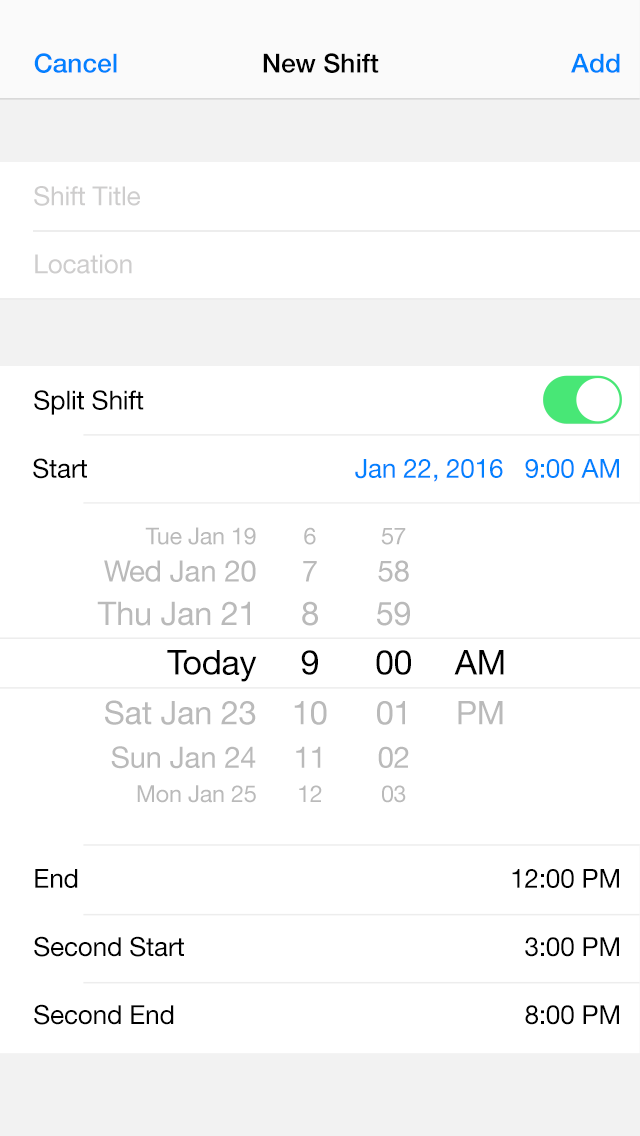
<style>
.page{position:relative;width:640px;height:1136px;background:#ffffff}
.page>*{position:absolute;margin:0}
.t1{font:26.3px "HelveticaNeue-Medium";color:#0281ff}
.t2{font:26.3px "HelveticaNeue-Medium";color:#000000}
.t3{font:26.3px/68.1px "HelveticaNeue";letter-spacing:-0.01em;color:#cecdcd}
.t4{font:26.3px/68.1px "HelveticaNeue";letter-spacing:-0.01em}
.t5{font:23.3px/28px "HelveticaNeue";letter-spacing:-0.01em;color:#bababa}
.t6{font:29.5px/37.3px "HelveticaNeue";letter-spacing:-0.01em;color:#bababa}
.t7{font:32.6px/43.5px "HelveticaNeue";letter-spacing:-0.01em;color:#bababa}
.t8{font:34.2px/49.7px "HelveticaNeue";letter-spacing:-0.01em;color:#000000}
.t9{font:32.6px/49.7px "HelveticaNeue";letter-spacing:-0.01em;color:#bababa}
.t10{font:29.5px/43.5px "HelveticaNeue";letter-spacing:-0.01em;color:#bababa}
.t11{font:23.3px/34.2px "HelveticaNeue";letter-spacing:-0.01em;color:#bababa}
</style>
<div class="page">
<p class="t1" style="left:34px;top:53px;width:83px;height:20px">Cancel</p>
<p class="t2" style="left:263px;top:53px;width:116px;height:20px">New Shift</p>
<p class="t1" style="left:571px;top:53px;width:49px;height:20px">Add</p>
<p class="t3" style="left:34px;top:186px;width:106px;height:88px">Shift Title<br>Location</p>
<p class="t4" style="left:33px;top:390px;width:151px;height:293px">Split Shift<br>Start<br>End<br>Second Start<br>Second End</p>
<p class="t4" style="left:355px;top:459px;width:264px;height:224px;text-align:right">Jan 22, 2016   9:00 AM<br>12:00 PM<br>3:00 PM<br>8:00 PM<br><br>Off<br>On<br><br>All Mail</p>
<p class="t5" style="left:97px;top:527px;width:160px;height:276px;text-align:right">Tue Jan 19<br><span class="t6">Wed Jan 20<br></span><span class="t7">Thu Jan 21<br></span><span class="t8">Today<br></span><span class="t9">Sat Jan 23<br></span><span class="t10">Sun Jan 24<br></span><span class="t11">Mon Jan 25</span></p>
<p class="t9" style="left:294px;top:527px;width:33px;height:275px;text-align:center"><span class="t5">6<br></span><span class="t6">7<br></span><span class="t7">8<br></span><span class="t8">9<br></span>10<br><span class="t10">11<br></span><span class="t11">12</span></p>
<p class="t5" style="left:376px;top:528px;width:35px;height:275px;text-align:center">57<br><span class="t6">58<br></span><span class="t7">59<br></span><span class="t8">00<br></span><span class="t9">01<br></span><span class="t10">02<br></span><span class="t11">03</span></p>
<p class="t8" style="left:454px;top:650px;width:50px;height:75px;text-align:center"><span class="t5"><br><br><br></span>AM<br><span class="t9">PM</span></p>
<p class="t4" style="left:33px;top:732px;width:151px;height:293px">Split Shift<br>Start<br>End<br>Second Start<br>Second End</p>
<p class="t4" style="left:355px;top:801px;width:264px;height:224px;text-align:right">Jan 22, 2016   9:00 AM<br>12:00 PM<br>3:00 PM<br>8:00 PM<br><br>Off<br>On<br><br>All Mail</p>
</div>
